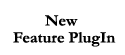
<style>
.page{position:relative;width:125px;height:55px;background:#ffffff}
.page>*{position:absolute;margin:0}
.t1{font:16px "Garamond-Bold";color:#000000}
</style>
<div class="page">
<p class="t1" style="left:45px;top:15px;width:33px;height:11px">New</p>
<p class="t1" style="left:13px;top:32px;width:103px;height:15px">Feature PlugIn</p>
</div>
